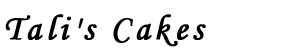
<style>
.page{position:relative;width:300px;height:55px;background:#ffffff}
.page>*{position:absolute;margin:0}
.t1{font:36px "MonotypeCorsiva";letter-spacing:0.1em;color:#000000;font-weight:bold}
</style>
<div class="page">
<p class="t1" style="left:5px;top:14px;width:201px;height:33px">Tali's Cakes</p>
</div>
